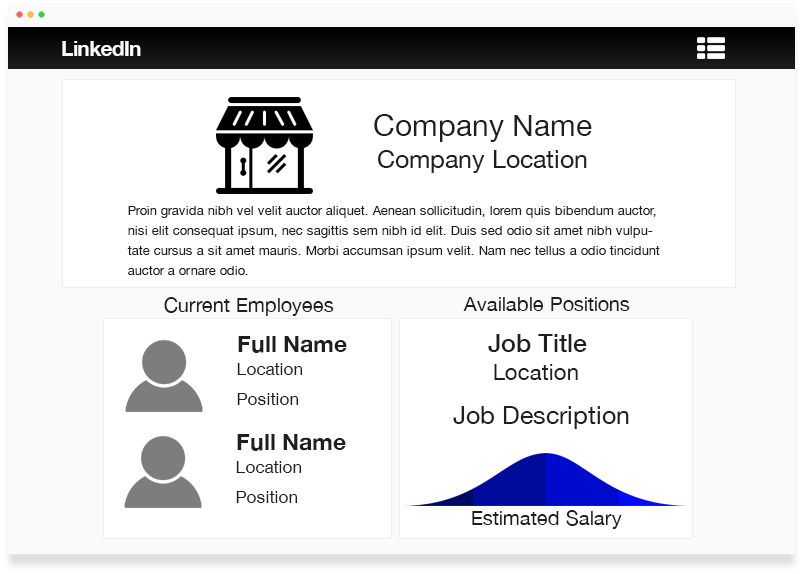
<style>
.page{position:relative;width:803px;height:574px;background:#ffffff}
.page>*{position:absolute;margin:0}
.t1{font:21.3px "HelveticaNeue-Bold";letter-spacing:-0.04em;color:#ffffff}
.t2{font:30px "HelveticaNeue";color:#1f1f1f}
.t3{font:25px "HelveticaNeue";color:#1f1f1f}
.t4{font:13px/20px "HelveticaNeue";color:#1f1f1f}
.t5{font:20px "HelveticaNeue";color:#1f1f1f}
.t6{font:23.3px "HelveticaNeue-Bold";color:#1f1f1f}
.t7{font:25px "HelveticaNeue-Medium";color:#1f1f1f}
.t8{font:17.3px "HelveticaNeue";color:#1f1f1f}
.t9{font:22px "HelveticaNeue";color:#1f1f1f}
</style>
<div class="page">
<p class="t1" style="left:62px;top:41px;width:79px;height:15px">LinkedIn</p>
<p class="t2" style="left:374px;top:114px;width:218px;height:28px">Company Name</p>
<p class="t3" style="left:378px;top:150px;width:209px;height:23px">Company Location</p>
<p class="t4" style="left:127px;top:206px;width:533px;height:69px">Proin gravida nibh vel velit auctor aliquet. Aenean sollicitudin, lorem quis bibendum auctor, nisi elit consequat ipsum, nec sagittis sem nibh id elit. Duis sed odio sit amet nibh vulputate cursus a sit amet mauris. Morbi accumsan ipsum velit. Nam nec tellus a odio tincidunt auctor a ornare odio.</p>
<p class="t5" style="left:164px;top:297px;width:170px;height:19px">Current Employees</p>
<p class="t5" style="left:463px;top:297px;width:167px;height:14px">Available Positions</p>
<p class="t6" style="left:238px;top:336px;width:109px;height:17px">Full Name</p>
<p class="t7" style="left:488px;top:334px;width:99px;height:18px">Job Title</p>
<p class="t8" style="left:237px;top:363px;width:66px;height:12px">Location</p>
<p class="t9" style="left:494px;top:364px;width:84px;height:16px">Location</p>
<p class="t8" style="left:237px;top:393px;width:62px;height:12px">Position</p>
<p class="t3" style="left:453px;top:406px;width:176px;height:23px">Job Description</p>
<p class="t6" style="left:237px;top:434px;width:109px;height:17px">Full Name</p>
<p class="t8" style="left:236px;top:461px;width:66px;height:12px">Location</p>
<p class="t8" style="left:236px;top:491px;width:62px;height:12px">Position</p>
<p class="t5" style="left:472px;top:510px;width:150px;height:19px">Estimated Salary</p>
</div>
